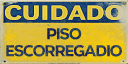
<style>
.page{position:relative;width:128px;height:64px}
.page>*{position:absolute;margin:0}
.t1{font:21.4px "URWGrotesk-Regular4";color:#e1bf37;text-transform:uppercase;scale:1.39 1}
.t2{font:15.7px "FONTSPRINGDEMO-OrganettoBoldRegular";letter-spacing:-0.06em;color:#2a495d;text-transform:uppercase;scale:1.04 1}
.t3{font:15.7px "FONTSPRINGDEMO-OrganettoBoldRegular";letter-spacing:-0.06em;color:#2b3a5a;text-transform:uppercase;scale:1.04 1}
</style>
<div class="page">
<p class="t1" style="left:5px;top:5px;width:119px;height:15px">cuidado</p>
<p class="t2" style="left:47px;top:28px;width:35px;height:12px">piso</p>
<p class="t3" style="left:6px;top:45px;width:116px;height:12px">Escorregadio</p>
</div>
